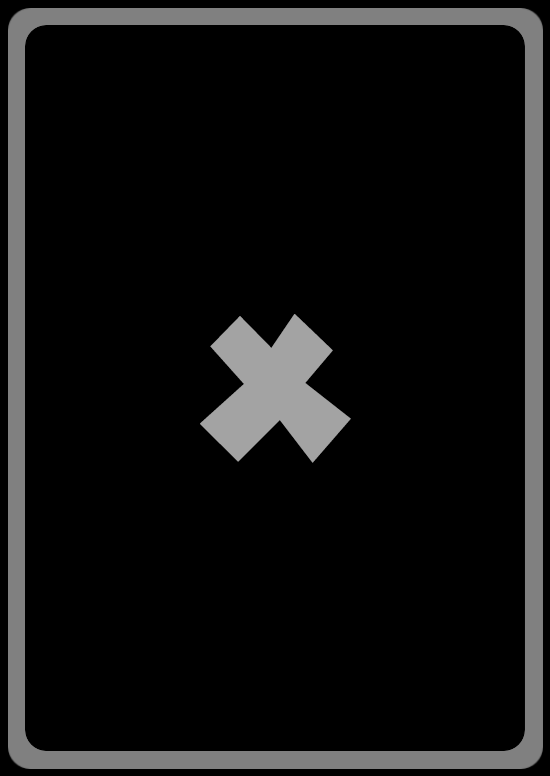
<style>
.page{position:relative;width:550px;height:776px;background:#000000}
.page>*{position:absolute;margin:0}
.t1{font:200px "SuperMarioGalaxy";letter-spacing:0.05em;color:#a3a3a3}
</style>
<div class="page">
<p class="t1" style="left:200px;top:314px;width:151px;height:149px">X</p>
</div>
